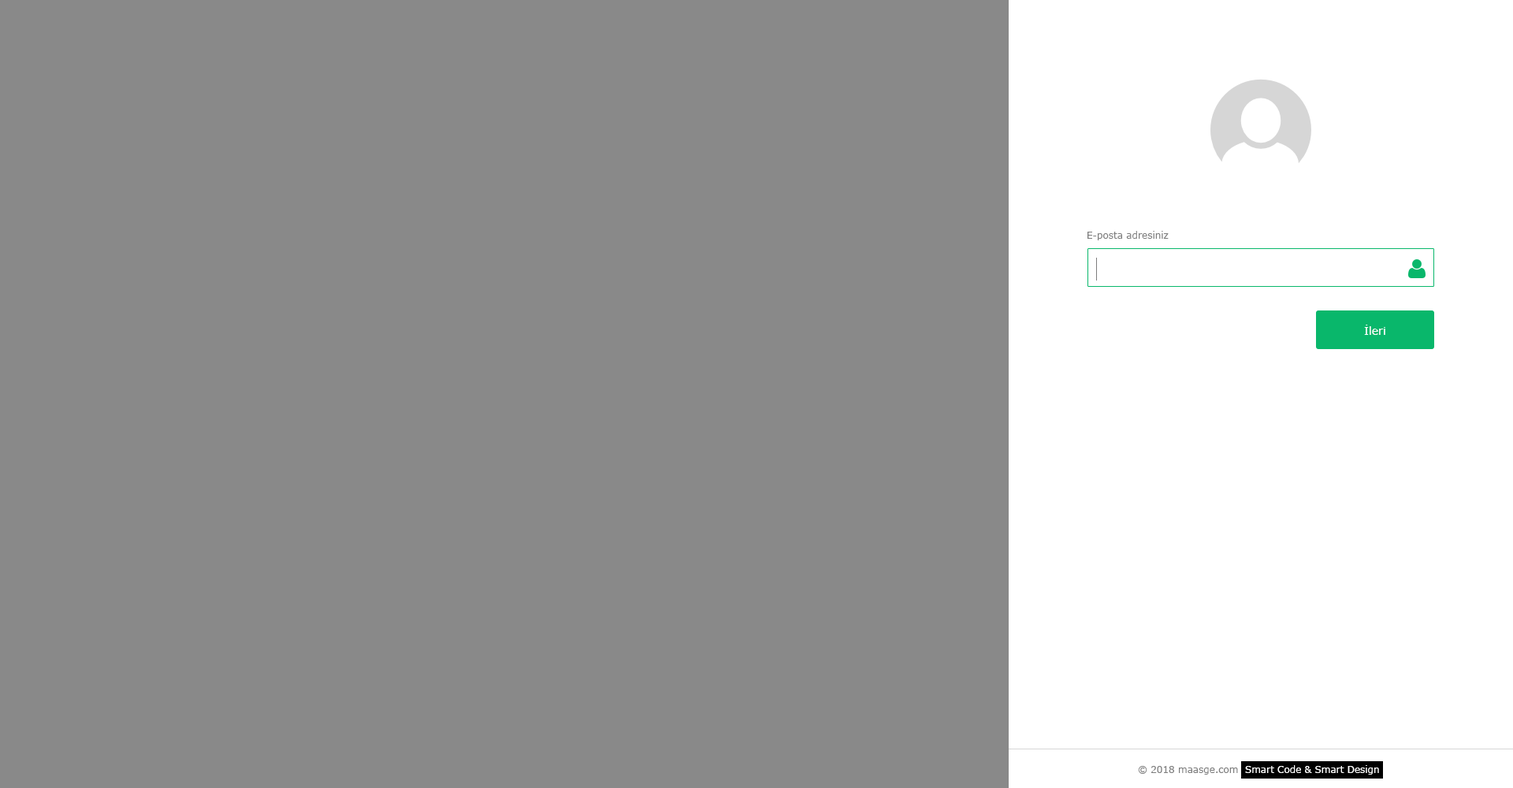
<style>
.page{position:relative;width:1513px;height:788px;background:#898989}
.page>*{position:absolute;margin:0}
.t1{font:9.5px "Verdana";color:#7d7d7d}
.t2{font:11px "Verdana";color:#ffffff}
</style>
<div class="page">
<p class="t1" style="left:1088px;top:231px;width:81px;height:9px">E-posta adresiniz</p>
<p class="t2" style="left:1364px;top:325px;width:21px;height:10px">İleri</p>
</div>
